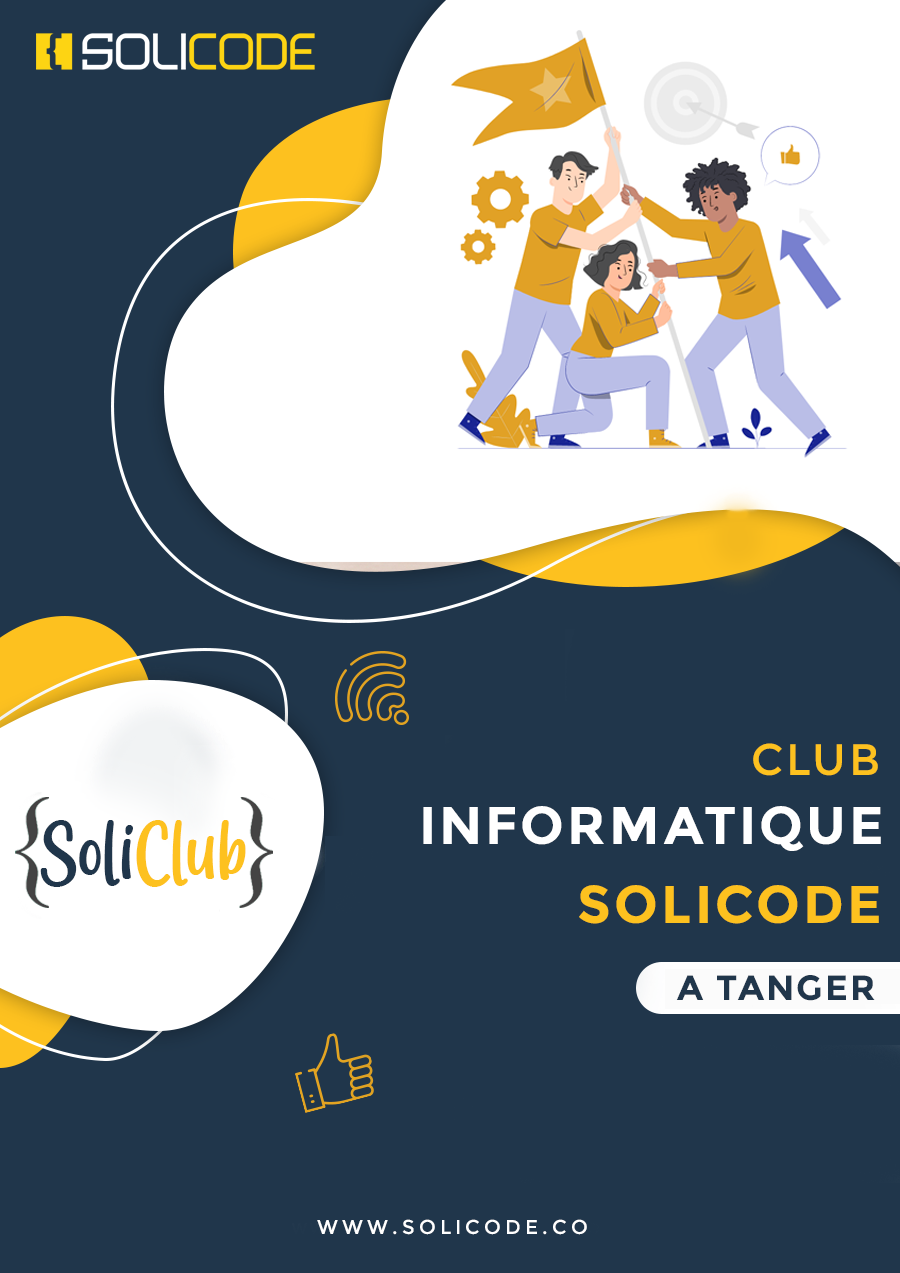
<style>
.page{position:relative;width:900px;height:1273px;background:#20364b}
.page>*{position:absolute;margin:0}
.t1{font:44px "Montserrat-Regular";letter-spacing:0.06em;color:#fdc11f;text-transform:uppercase}
.t2{font:53px "Montserrat-Bold";letter-spacing:0.06em;color:#ffffff;text-transform:uppercase}
.t3{font:79.6px "LadyNature";color:#20364b}
.t4{font:79.6px "LadyNature";color:#fdc11f}
.t5{font:53px "Montserrat-Bold";letter-spacing:0.06em;color:#fdc11f;text-transform:uppercase}
.t6{font:20px "Montserrat-Regular";letter-spacing:0.2em;color:#ffffff;text-transform:uppercase}
</style>
<div class="page">
<p class="t1" style="left:753px;top:743px;width:125px;height:33px">CLUB</p>
<p class="t2" style="left:423px;top:806px;width:458px;height:45px">INFORMATIQUE</p>
<p class="t3" style="left:40px;top:820px;width:206px;height:67px">Soli<span class="t4">Club</span></p>
<p class="t5" style="left:579px;top:885px;width:300px;height:39px">SOLICODE</p>
<p class="t6" style="left:317px;top:1219px;width:270px;height:16px">WWW.solicode.co</p>
</div>
